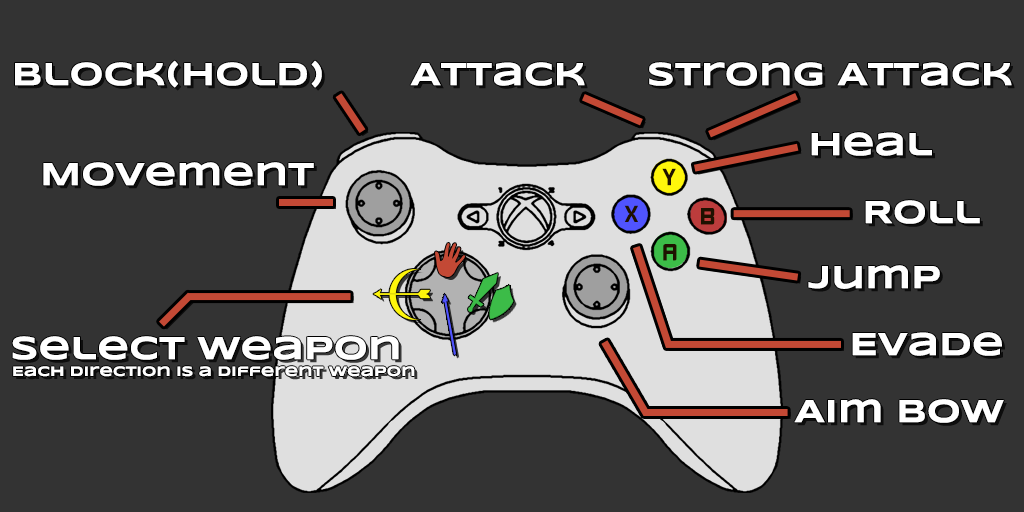
<style>
.page{position:relative;width:1024px;height:512px;background:#333333}
.page>*{position:absolute;margin:0}
.t1{font:33px "Syncopate-Bold";color:#ffffff}
.t2{font:14px "Syncopate-Bold";color:#ffffff}
</style>
<div class="page">
<p class="t1" style="left:15px;top:60px;width:307px;height:28px">Block(hold)</p>
<p class="t1" style="left:410px;top:62px;width:175px;height:24px">Attack</p>
<p class="t1" style="left:649px;top:62px;width:363px;height:24px">Strong Attack</p>
<p class="t1" style="left:811px;top:132px;width:121px;height:24px">Heal</p>
<p class="t1" style="left:43px;top:162px;width:271px;height:24px">Movement</p>
<p class="t1" style="left:865px;top:200px;width:115px;height:24px">Roll</p>
<p class="t1" style="left:808px;top:265px;width:132px;height:24px">Jump</p>
<p class="t2" style="left:12px;top:336px;width:403px;height:41px"><span class="t1">Select Weapon<br></span>Each direction is a different weapon</p>
<p class="t1" style="left:852px;top:332px;width:150px;height:24px">Evade</p>
<p class="t1" style="left:794px;top:399px;width:210px;height:24px">Aim Bow</p>
</div>
